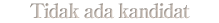
<style>
.page{position:relative;width:219px;height:23px;background:#ffffff}
.page>*{position:absolute;margin:0}
.t1{font:20px "RyuminPro-ExBold";letter-spacing:-0.08em}
</style>
<div class="page">
<p class="t1" style="left:30px;top:3px;width:160px;height:16px">Tidak ada kandidat</p>
</div>
